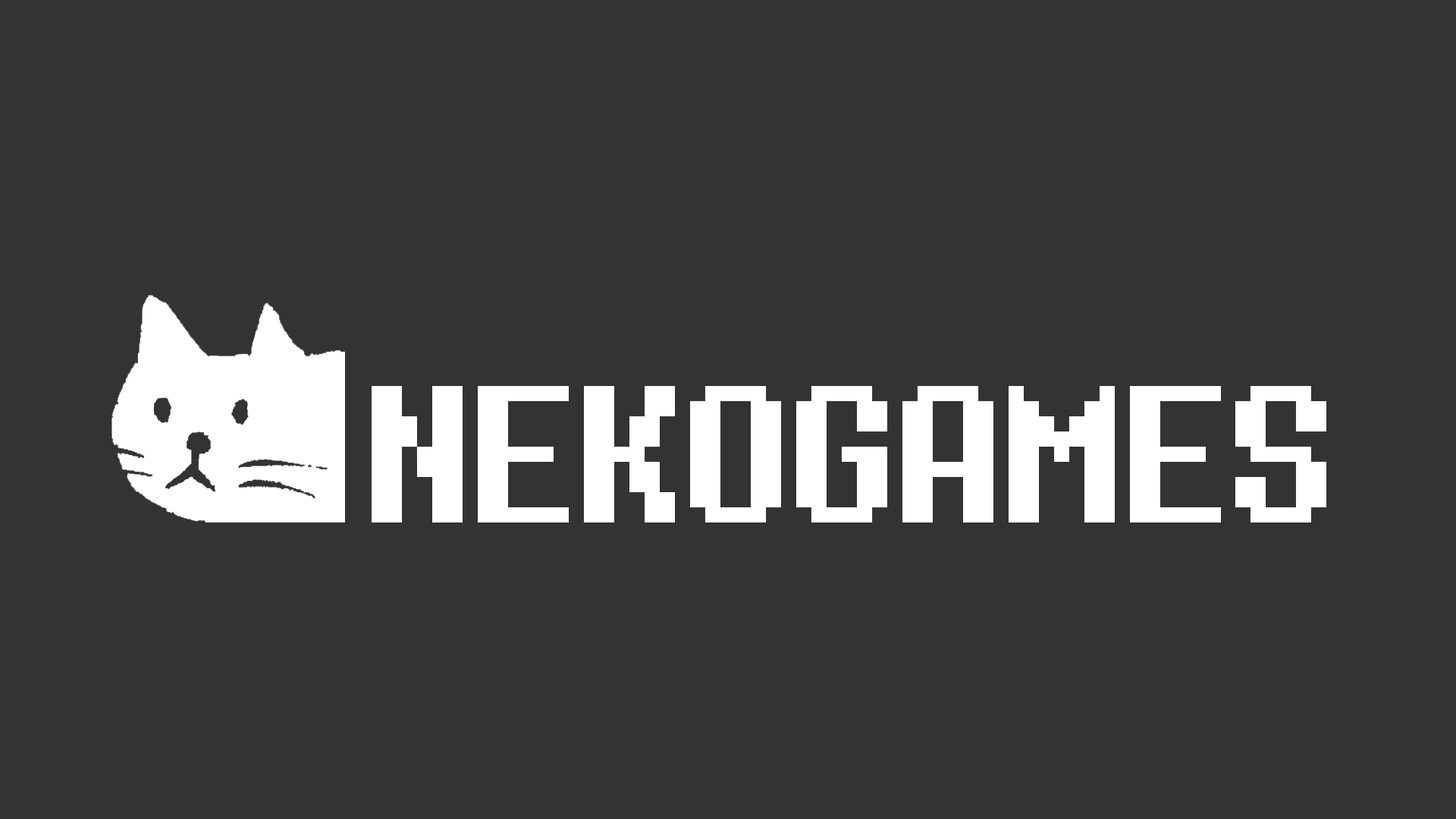
<style>
.page{position:relative;width:1456px;height:819px;background:#333333}
.page>*{position:absolute;margin:0}
.t1{font:202.2px "DeterminationSans";color:#ffffff}
</style>
<div class="page">
<p class="t1" style="left:372px;top:386px;width:954px;height:136px">NEKOGAMES</p>
</div>
